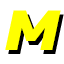
<style>
.page{position:relative;width:64px;height:64px;background:#ffffff}
.page>*{position:absolute;margin:0}
.t1{font:54.8px "FugazOne-Regular";letter-spacing:0.37em;color:#ffff00;scale:1.2 1}
</style>
<div class="page">
<p class="t1" style="left:5px;top:10px;width:56px;height:40px">M</p>
</div>
